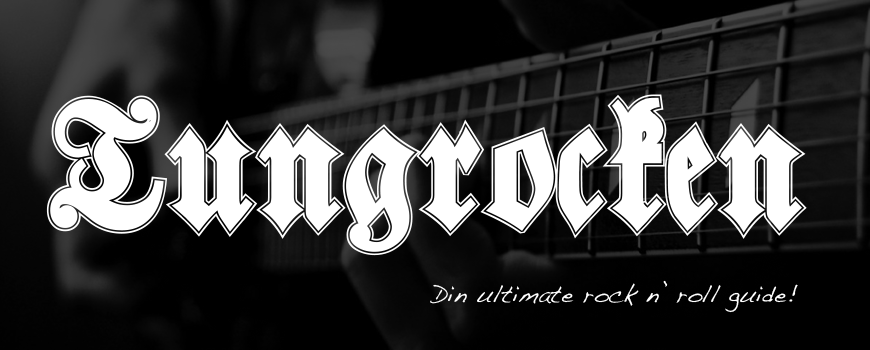
<style>
.page{position:relative;width:870px;height:350px;background:#000000}
.page>*{position:absolute;margin:0}
.t1{font:173.3px "Walbaum-Fraktur-Inline-Bold";color:#ffffff}
.t2{font:24px "Handwriting-Dakota";color:#ffffff}
</style>
<div class="page">
<p class="t1" style="left:46px;top:94px;width:761px;height:162px">Tungrocken</p>
<p class="t2" style="left:430px;top:280px;width:368px;height:33px">Din ultimate rock n’ roll guide!</p>
</div>
